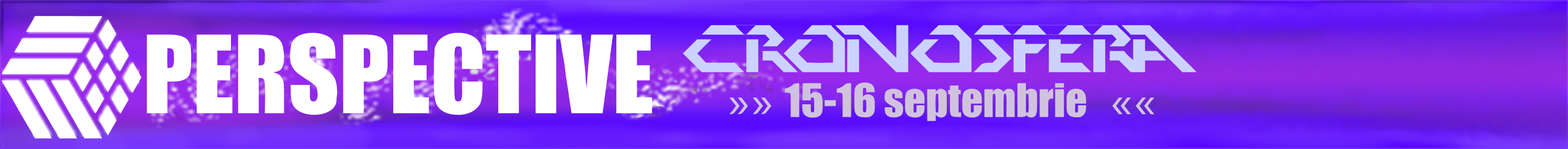
<style>
.page{position:relative;width:1568px;height:149px}
.page>*{position:absolute;margin:0}
.t1{font:67px "PerfectDark(BRK)";color:#ccd2ff}
.t2{font:99.6px "Impact";color:#ffffff}
.t3{font:42.9px "Impact";color:#d0c2de}
.t4{font:42.9px "AcuminConcept-Regular";color:#d0c2de}
</style>
<div class="page">
<p class="t1" style="left:683px;top:25px;width:514px;height:48px">CRONOSFERA</p>
<p class="t2" style="left:147px;top:33px;width:505px;height:82px">PERSPECTIVE</p>
<p class="t3" style="left:729px;top:83px;width:425px;height:38px"><span class="t4">»» </span>15-16 septembrie   <span class="t4">««</span></p>
</div>
